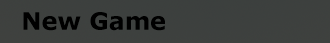
<style>
.page{position:relative;width:330px;height:43px;background:#3d403e}
.page>*{position:absolute;margin:0}
.t1{font:24px "Verdana-Bold";color:#000000}
</style>
<div class="page">
<p class="t1" style="left:23px;top:12px;width:142px;height:19px">New Game</p>
</div>
